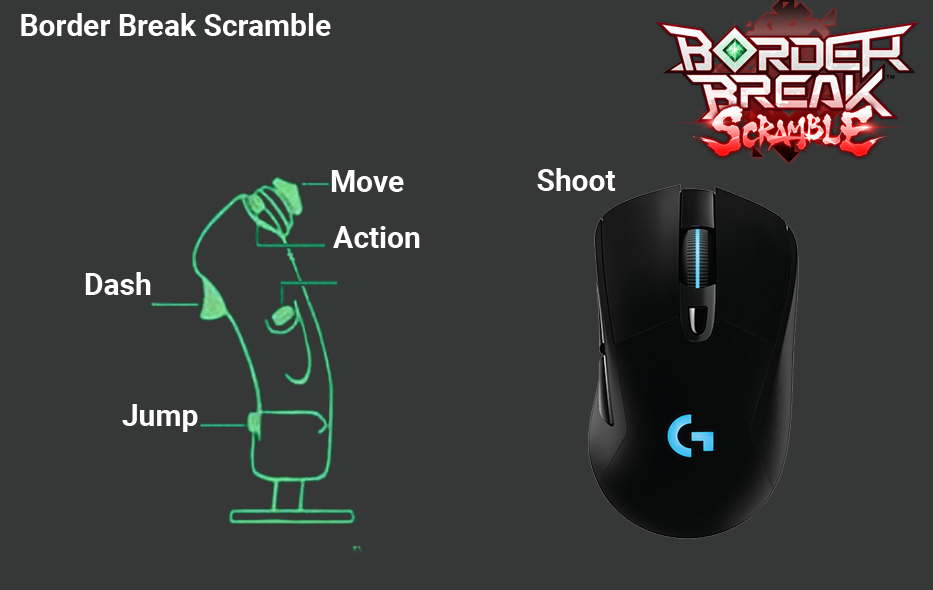
<style>
.page{position:relative;width:933px;height:590px;background:#363838}
.page>*{position:absolute;margin:0}
.t1{font:30px "Roboto-Bold";color:#ffffff}
</style>
<div class="page">
<p class="t1" style="left:21px;top:13px;width:310px;height:23px">Border Break Scramble</p>
<p class="t1" style="left:331px;top:170px;width:73px;height:22px">Move</p>
<p class="t1" style="left:537px;top:168px;width:79px;height:23px">Shoot</p>
<p class="t1" style="left:333px;top:226px;width:87px;height:22px">Action</p>
<p class="t1" style="left:85px;top:272px;width:66px;height:23px">Dash</p>
<p class="t1" style="left:122px;top:404px;width:76px;height:28px">Jump</p>
</div>
